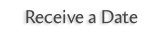
<style>
.page{position:relative;width:164px;height:32px;background:#ffffff}
.page>*{position:absolute;margin:0}
.t1{font:18.7px "Amira-Roman";color:#474747}
</style>
<div class="page">
<p class="t1" style="left:26px;top:9px;width:112px;height:15px">Receive a Date</p>
</div>
